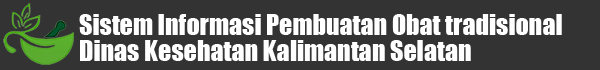
<style>
.page{position:relative;width:600px;height:70px;background:#333333}
.page>*{position:absolute;margin:0}
.t1{font:26px "Impact";color:#ffffff}
</style>
<div class="page">
<p class="t1" style="left:79px;top:14px;width:483px;height:21px">Sistem Informasi Pembuatan Obat tradisional</p>
<p class="t1" style="left:80px;top:40px;width:391px;height:21px">Dinas Kesehatan Kalimantan Selatan</p>
</div>
